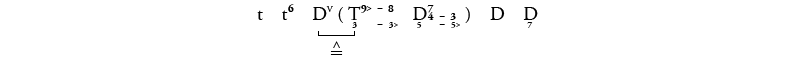
<style>
.page{position:relative;width:800px;height:60px;background:#ffffff}
.page>*{position:absolute;margin:0}
.t1{font:18.7px "Analysia";color:#000000}
.t2{font:18.7px "LucidaSansUnicode";color:#000000}
</style>
<div class="page">
<p class="t1" style="left:257px;top:4px;width:281px;height:24px">t tÎª Dî ( óTÑ êª ˜™ª Ðòúª õDÖÏª ™˜ª ôúÕª  ) D ùD</p>
<p class="t2" style="left:330px;top:41px;width:13px;height:14px">≙</p>
</div>
